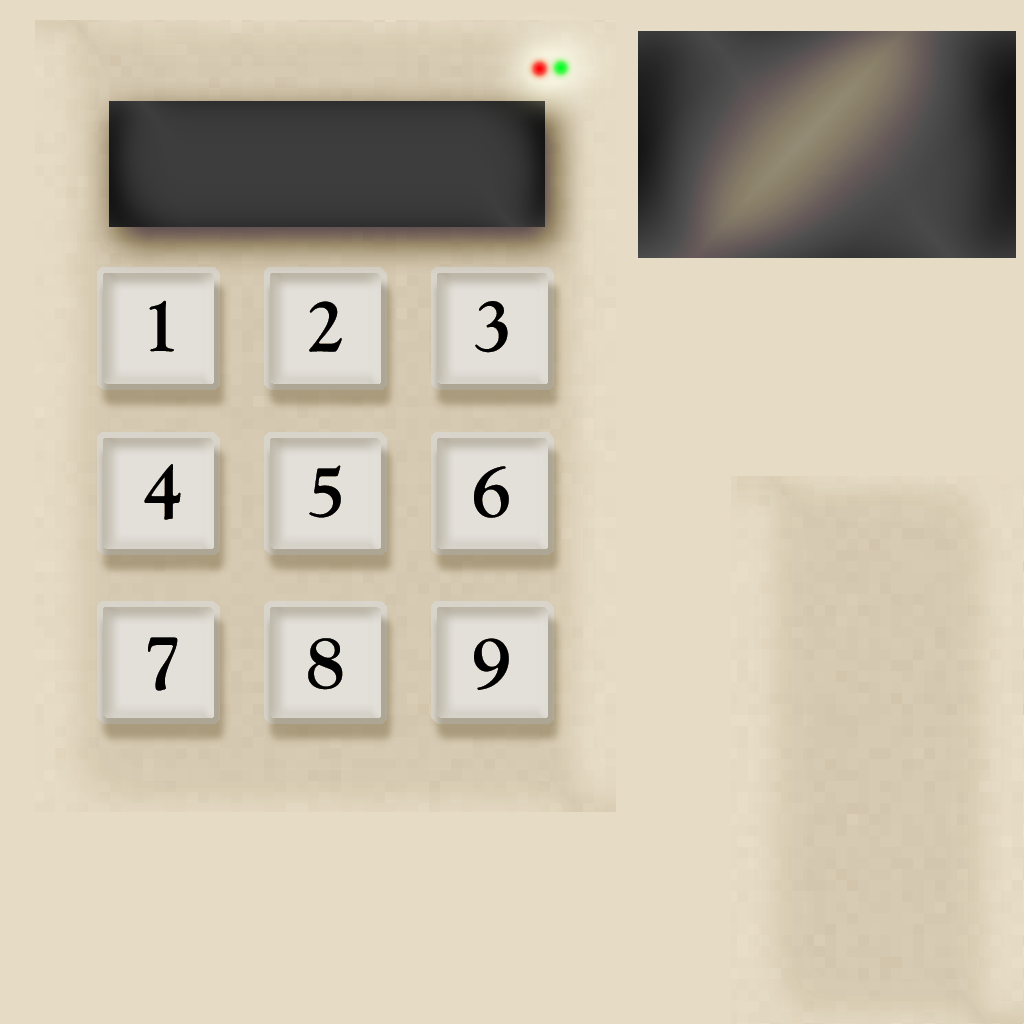
<style>
.page{position:relative;width:1024px;height:1024px;background:#e6dbc5}
.page>*{position:absolute;margin:0}
.t1{font:78px "GoudyOldStyleT-Bold";color:#000000}
</style>
<div class="page">
<p class="t1" style="left:149px;top:300px;width:25px;height:52px">1</p>
<p class="t1" style="left:309px;top:301px;width:33px;height:51px">2</p>
<p class="t1" style="left:475px;top:301px;width:33px;height:52px">3</p>
<p class="t1" style="left:144px;top:464px;width:37px;height:56px">4</p>
<p class="t1" style="left:309px;top:465px;width:32px;height:53px">5</p>
<p class="t1" style="left:474px;top:466px;width:35px;height:52px">6</p>
<p class="t1" style="left:148px;top:637px;width:30px;height:54px">7</p>
<p class="t1" style="left:308px;top:638px;width:35px;height:52px">8</p>
<p class="t1" style="left:474px;top:638px;width:35px;height:52px">9</p>
</div>
